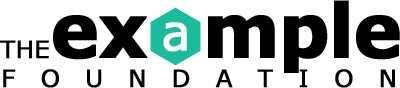
<style>
.page{position:relative;width:400px;height:88px;background:#ffffff}
.page>*{position:absolute;margin:0}
.t1{font:74.2px "Verdana-Bold";letter-spacing:-0.03em;color:#000000;font-weight:bold}
.t2{font:49.4px "Verdana";letter-spacing:-0.03em;color:#ffffff;font-weight:bold}
.t3{font:24px "Verdana";color:#000000;font-weight:bold}
.t4{font:24px "Verdana";letter-spacing:1.04em;color:#000000;font-weight:bold}
</style>
<div class="page">
<p class="t1" style="left:53px;top:0px;width:347px;height:73px">ex  mple</p>
<p class="t2" style="left:163px;top:22px;width:24px;height:30px">a</p>
<p class="t3" style="left:0px;top:40px;width:49px;height:19px">THE</p>
<p class="t4" style="left:3px;top:69px;width:392px;height:19px">FOUNDATION</p>
</div>
